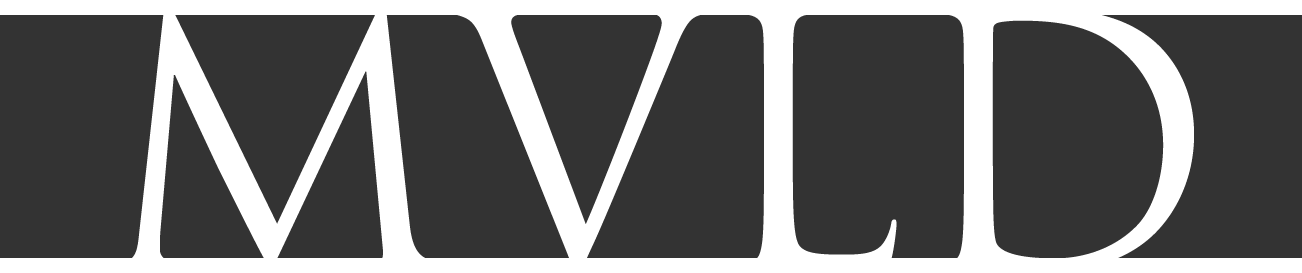
<style>
.page{position:relative;width:1302px;height:273px;background:#333333}
.page>*{position:absolute;margin:0}
.t1{font:341px "TrajanPro-Regular";letter-spacing:-0.005em;color:#ffffff}
</style>
<div class="page">
<p class="t1" style="left:112px;top:5px;width:1082px;height:266px">MVLD</p>
</div>
